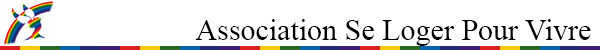
<style>
.page{position:relative;width:600px;height:50px;background:#ffffff}
.page>*{position:absolute;margin:0}
.t1{font:30px "TimesNewRomanPSMT";color:#000000}
</style>
<div class="page">
<p class="t1" style="left:195px;top:19px;width:396px;height:27px">Association Se Loger Pour Vivre</p>
</div>
